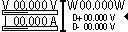
<style>
.page{position:relative;width:128px;height:32px;background:#ffffff}
.page>*{position:absolute;margin:0}
.t1{font:12px "AdobeHeitiStd-Regular";color:#000500}
.t2{font:8px "AdobeHeitiStd-Regular";color:#000500}
</style>
<div class="page">
<p class="t1" style="left:2px;top:0px;width:7px;height:10px">V</p>
<p class="t1" style="left:14px;top:0px;width:33px;height:10px">00.000</p>
<p class="t1" style="left:50px;top:0px;width:7px;height:10px">V</p>
<p class="t1" style="left:67px;top:0px;width:11px;height:10px">Ｗ</p>
<p class="t1" style="left:80px;top:0px;width:33px;height:10px">00.000</p>
<p class="t1" style="left:114px;top:0px;width:11px;height:10px">W</p>
<p class="t1" style="left:14px;top:16px;width:33px;height:10px">00.000</p>
<p class="t1" style="left:50px;top:16px;width:7px;height:10px">A</p>
<p class="t2" style="left:73px;top:14px;width:9px;height:7px">Ｄ+</p>
<p class="t2" style="left:84px;top:14px;width:23px;height:7px">00.000</p>
<p class="t2" style="left:110px;top:14px;width:5px;height:7px">V</p>
<p class="t2" style="left:73px;top:23px;width:6px;height:7px">D-</p>
<p class="t2" style="left:84px;top:23px;width:23px;height:7px">00.000</p>
<p class="t2" style="left:110px;top:23px;width:5px;height:7px">V</p>
</div>
